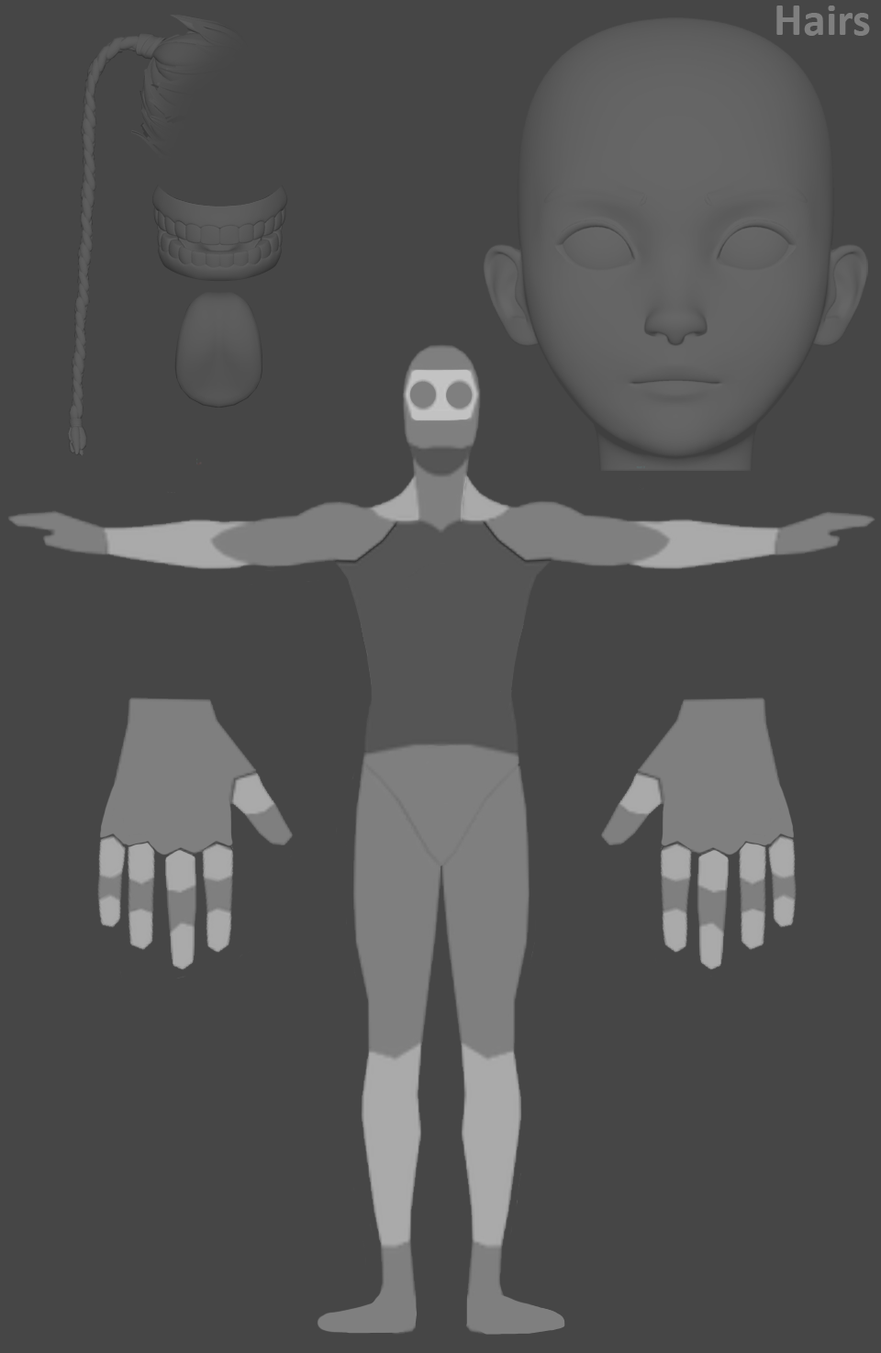
<style>
.page{position:relative;width:881px;height:1353px;background:#464646}
.page>*{position:absolute;margin:0}
.t1{font:45.9px "Calibri-Bold";color:#7f7f7f}
</style>
<div class="page">
<p class="t1" style="left:777px;top:6px;width:93px;height:30px">Hairs</p>
</div>
